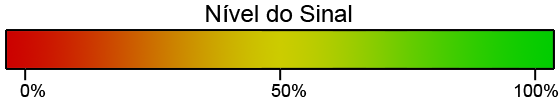
<style>
.page{position:relative;width:560px;height:102px;background:#ffffff}
.page>*{position:absolute;margin:0}
.t1{font:24px "ArialMT";color:#000000}
.t2{font:18px "ArialMT";color:#000000}
</style>
<div class="page">
<p class="t1" style="left:206px;top:5px;width:146px;height:17px">Nível do Sinal</p>
<p class="t2" style="left:20px;top:84px;width:539px;height:13px">0%             50%           100%</p>
</div>
